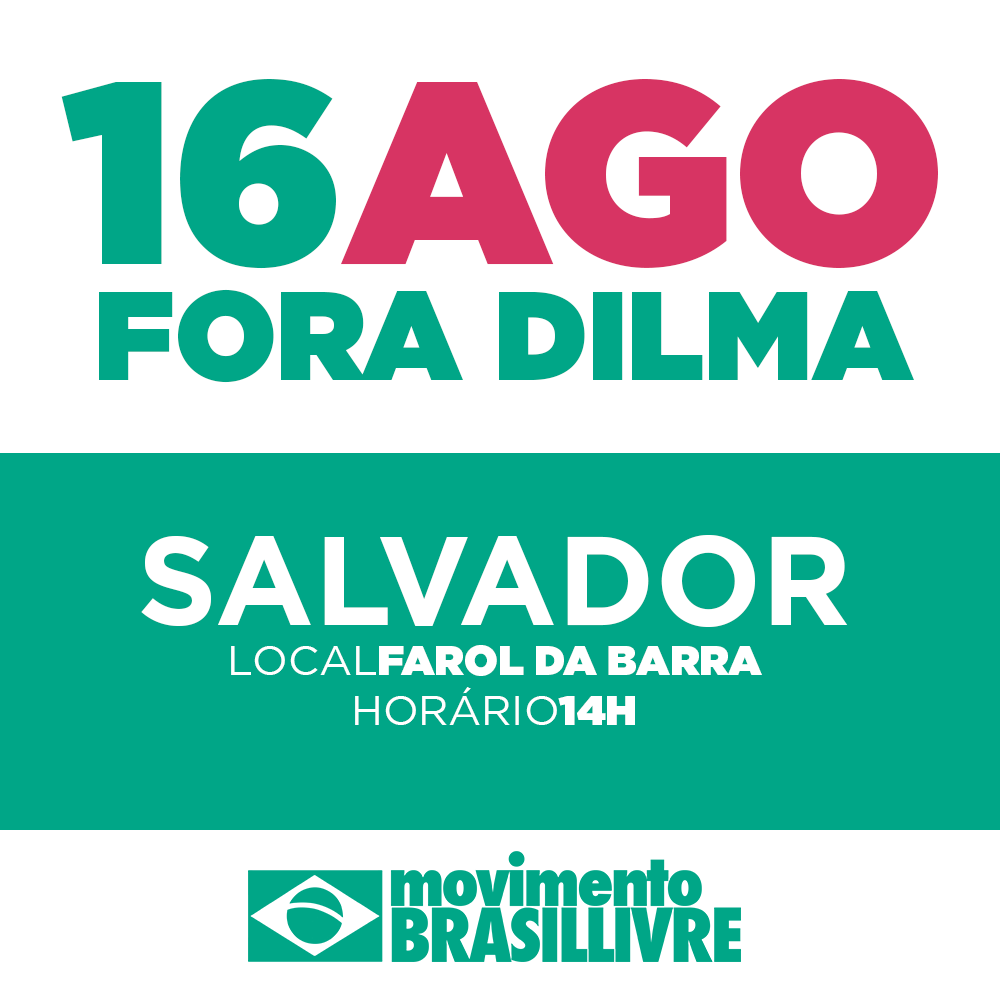
<style>
.page{position:relative;width:1000px;height:1000px;background:#ffffff}
.page>*{position:absolute;margin:0}
.t1{font:125px/116.7px "Gotham-Ultra";color:#00a687;text-transform:uppercase}
.t2{font:258.3px "Gotham-Ultra";color:#00a687;text-transform:uppercase}
.t3{font:258.3px "Gotham-Ultra";color:#d73463;text-transform:uppercase}
.t4{font:41.7px "Gotham-Ultra";color:#ffffff;text-transform:uppercase}
.t5{font:125px "Gotham-Bold";color:#ffffff;text-transform:uppercase}
.t6{font:41.7px "GothamBook";color:#ffffff;text-transform:uppercase}
</style>
<div class="page">
<p class="t1" style="left:61px;top:79px;width:877px;height:304px;text-align:center"><span class="t2">16</span><span class="t3">ago<br></span>fora dilma</p>
<p class="t4" style="left:141px;top:535px;width:707px;height:190px;text-align:center"><span class="t5">salvador<br></span><span class="t6">local</span>farol da barra<br><span class="t6">horário</span>14h</p>
</div>
